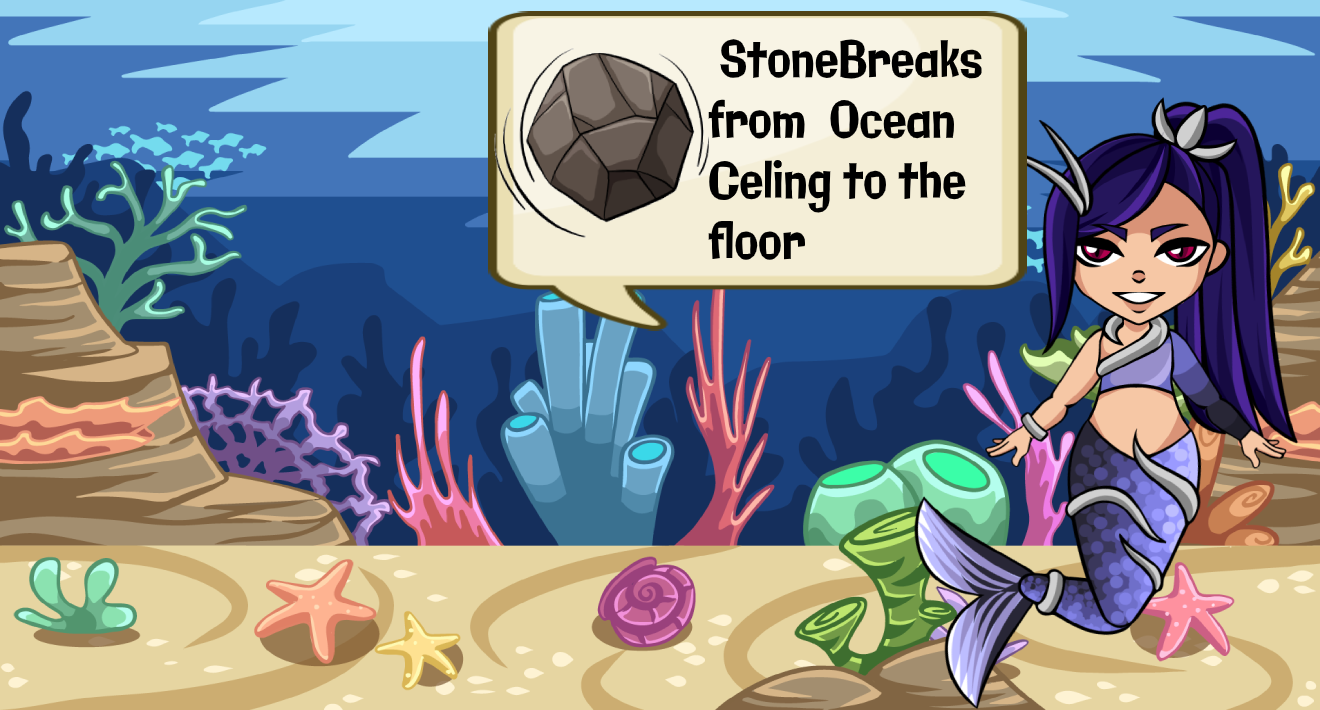
<style>
.page{position:relative;width:1320px;height:710px}
.page>*{position:absolute;margin:0}
.t1{font:50.5px "Galindo-Regular";color:#000000;scale:0.77 1}
</style>
<div class="page">
<p class="t1" style="left:708px;top:39px;width:274px;height:221px">StoneBreaks <br>from  Ocean <br>Celing to the <br>floor</p>
</div>
